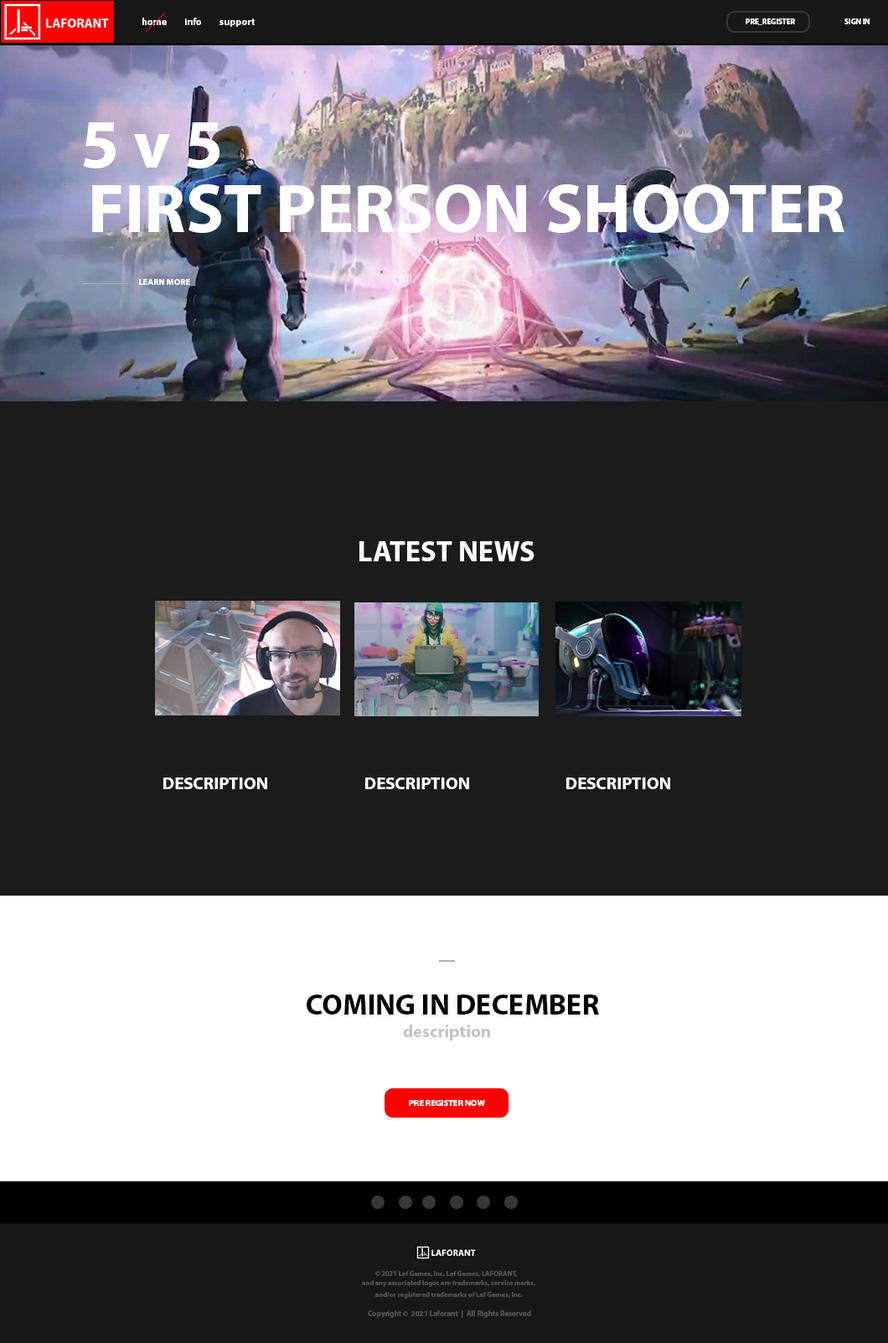
<style>
.page{position:relative;width:888px;height:1343px;background:#1b1b1b}
.page>*{position:absolute;margin:0}
.t1{font:9.9px "MyriadPro-Bold";color:#ffffff}
.t2{font:7.6px "MyriadPro-Bold";color:#ffffff}
.t3{font:69.8px "MyriadPro-Bold";color:#ffffff}
.t4{font:8.7px "MyriadPro-Bold";color:#ffffff}
.t5{font:29.1px "MyriadPro-Bold";color:#ffffff}
.t6{font:17.5px "MyriadPro-Bold";color:#ffffff}
.t7{font:29.1px "MyriadPro-Bold";color:#000000}
.t8{font:17.5px "MyriadPro-Bold";color:#c3c3c3}
.t9{font:7px "MyriadPro-Bold";color:#505050}
.t10{font:7.6px "MyriadPro-Bold";color:#505050}
</style>
<div class="page">
<p class="t1" style="left:142px;top:18px;width:25px;height:7px">home</p>
<p class="t1" style="left:185px;top:18px;width:16px;height:7px">info</p>
<p class="t1" style="left:219px;top:18px;width:36px;height:9px">support</p>
<p class="t2" style="left:746px;top:18px;width:49px;height:7px">PRE_REGISTER</p>
<p class="t2" style="left:844px;top:18px;width:26px;height:6px">SIGN IN</p>
<p class="t3" style="left:83px;top:122px;width:136px;height:46px">5 v 5</p>
<p class="t3" style="left:92px;top:184px;width:752px;height:49px">FIRST PERSON SHOOTER</p>
<p class="t4" style="left:139px;top:279px;width:51px;height:6px">LEARN MORE</p>
<p class="t5" style="left:359px;top:541px;width:175px;height:20px">LATEST NEWS</p>
<p class="t6" style="left:163px;top:777px;width:104px;height:12px">DESCRIPTION</p>
<p class="t6" style="left:365px;top:777px;width:104px;height:12px">DESCRIPTION</p>
<p class="t6" style="left:566px;top:777px;width:104px;height:12px">DESCRIPTION</p>
<p class="t7" style="left:307px;top:994px;width:292px;height:20px">COMING IN DECEMBER</p>
<p class="t8" style="left:403px;top:1025px;width:87px;height:15px">description</p>
<p class="t4" style="left:409px;top:1100px;width:76px;height:6px">PRE REGISTER NOW</p>
<p class="t9" style="left:375px;top:1271px;width:142px;height:6px">© 2021 Laf Games, Inc. Laf Games, LAFORANT,</p>
<p class="t9" style="left:362px;top:1280px;width:173px;height:7px">and any associated logos are trademarks, service marks,</p>
<p class="t9" style="left:375px;top:1292px;width:148px;height:6px">and/or registered trademarks of Laf Games, Inc.</p>
<p class="t10" style="left:368px;top:1310px;width:163px;height:9px">Copyright ©  2021 Laforant  |  All Rights Reserved</p>
</div>
